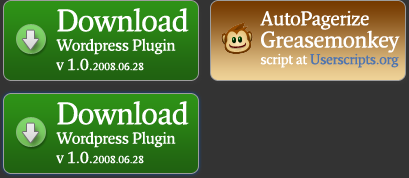
<style>
.page{position:relative;width:409px;height:178px;background:#333333}
.page>*{position:absolute;margin:0}
.t1{font:15.7px/19.4px "FrescoStd-SemiBold";letter-spacing:-0.025em;color:#ffffff}
.t2{font:30.6px/19.4px "FrescoStd-SemiBold";letter-spacing:-0.025em;color:#ffffff}
.t3{font:10.1px/19.4px "FrescoStd-SemiBold";letter-spacing:-0.025em;color:#ffffff}
.t4{font:13.9px "FrescoStd-SemiBold";letter-spacing:-0.025em;color:#5075af}
.t5{font:19.4px/25px "FrescoStd-SemiBold";letter-spacing:-0.025em;color:#ffffff}
.t6{font:22.2px/22.2px "FrescoStd-SemiBold";letter-spacing:-0.025em;color:#ffffff}
.t7{font:13.9px "FrescoStd-SemiBold";letter-spacing:-0.025em;color:#ffffff}
</style>
<div class="page">
<p class="t1" style="left:56px;top:8px;width:133px;height:63px"><span class="t2">Download<br></span>Wordpress Plugin<br>v 1.0.<span class="t3">2008.06.28</span></p>
<p class="t4" style="left:260px;top:10px;width:140px;height:58px"><span class="t5">AutoPagerize<br></span><span class="t6">Greasemonkey<br></span><span class="t7">script at </span>Userscripts.org</p>
<p class="t1" style="left:56px;top:101px;width:133px;height:63px"><span class="t2">Download<br></span>Wordpress Plugin<br>v 1.0.<span class="t3">2008.06.28</span></p>
</div>
